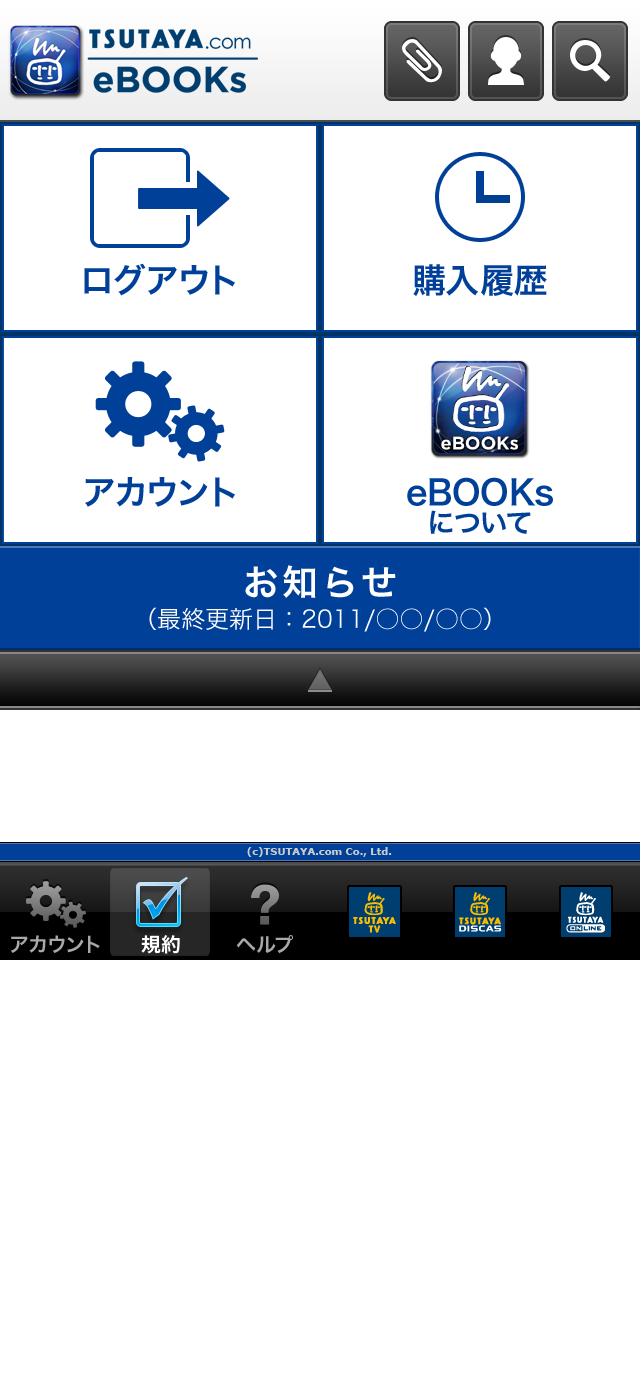
<style>
.page{position:relative;width:640px;height:1390px;background:#ffffff}
.page>*{position:absolute;margin:0}
.t1{font:26px "HiraKakuPro-W6"}
.t2{font:34px "HiraKakuPro-W6";color:#004098}
.t3{font:34px/28px "HiraKakuPro-W6";color:#004098}
.t4{font:28px/28px "HiraKakuPro-W6";color:#004098}
.t5{font:36px "HiraKakuPro-W6";letter-spacing:0.1em;color:#ffffff}
.t6{font:24px "HiraKakuPro-W3";color:#ffffff}
.t7{font:26px "HiraKakuPro-W6";color:#676767}
.t8{font:10px "Verdana-Bold";color:#cccccc}
.t9{font:20px "HiraKakuPro-W6";color:#a8a8a8}
.t10{font:20px "HiraKakuPro-W6";color:#ffffff}
</style>
<div class="page">
<p class="t1" style="left:308px;top:142px;width:24px;height:21px">▼</p>
<p class="t2" style="left:84px;top:263px;width:151px;height:33px">ログアウト</p>
<p class="t2" style="left:413px;top:264px;width:134px;height:32px">購入履歴</p>
<p class="t2" style="left:85px;top:477px;width:150px;height:30px">アカウント</p>
<p class="t3" style="left:407px;top:477px;width:146px;height:57px;text-align:center">eBOOKs<br><span class="t4">について</span></p>
<p class="t5" style="left:245px;top:565px;width:151px;height:33px">お知らせ</p>
<p class="t6" style="left:149px;top:607px;width:342px;height:25px">（最終更新日：2011/○○/○○）</p>
<p class="t7" style="left:308px;top:669px;width:24px;height:21px">▼</p>
<p class="t8" style="left:247px;top:847px;width:145px;height:10px">(c)TSUTAYA.com Co., Ltd.</p>
<p class="t9" style="left:10px;top:935px;width:90px;height:18px">アカウント</p>
<p class="t10" style="left:141px;top:935px;width:39px;height:19px">規約</p>
<p class="t9" style="left:236px;top:935px;width:57px;height:19px">ヘルプ</p>
</div>
